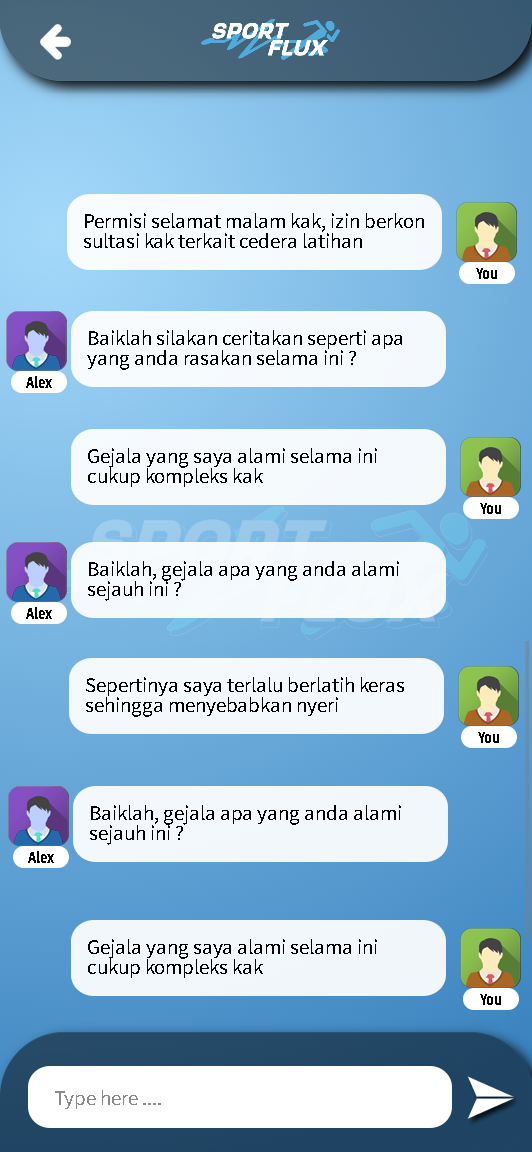
<style>
.page{position:relative;width:532px;height:1152px}
.page>*{position:absolute;margin:0}
.t1{font:21px/20px "SourceSansPro-Regular";color:#000000}
.t2{font:17.6px "SourceSansPro-Bold";color:#000000;scale:0.8 1}
.t3{font:21px "SourceSansPro-Regular";color:#898989}
</style>
<div class="page">
<p class="t1" style="left:84px;top:213px;width:340px;height:35px;text-align:right">Permisi selamat malam kak, izin berkon<br>sultasi kak terkait cedera latihan</p>
<p class="t2" style="left:476px;top:268px;width:21px;height:11px">You</p>
<p class="t1" style="left:87px;top:330px;width:315px;height:40px;text-align:right">Baiklah silakan ceritakan seperti apa<br>yang anda rasakan selama ini ?</p>
<p class="t2" style="left:26px;top:376px;width:26px;height:12px">Alex</p>
<p class="t1" style="left:88px;top:448px;width:289px;height:39px;text-align:right">Gejala yang saya alami selama ini <br>cukup kompleks kak</p>
<p class="t2" style="left:480px;top:503px;width:21px;height:11px">You</p>
<p class="t1" style="left:88px;top:561px;width:311px;height:40px;text-align:right">Baiklah, gejala apa yang anda alami<br>sejauh ini ?</p>
<p class="t2" style="left:26px;top:607px;width:26px;height:12px">Alex</p>
<p class="t1" style="left:86px;top:677px;width:318px;height:40px;text-align:right">Sepertinya saya terlalu berlatih keras <br>sehingga menyebabkan nyeri</p>
<p class="t2" style="left:478px;top:732px;width:21px;height:11px">You</p>
<p class="t1" style="left:90px;top:805px;width:311px;height:40px;text-align:right">Baiklah, gejala apa yang anda alami<br>sejauh ini ?</p>
<p class="t2" style="left:28px;top:851px;width:26px;height:12px">Alex</p>
<p class="t1" style="left:88px;top:939px;width:289px;height:39px;text-align:right">Gejala yang saya alami selama ini <br>cukup kompleks kak</p>
<p class="t2" style="left:480px;top:994px;width:21px;height:11px">You</p>
<p class="t3" style="left:55px;top:1090px;width:106px;height:19px">Type here ....</p>
</div>
